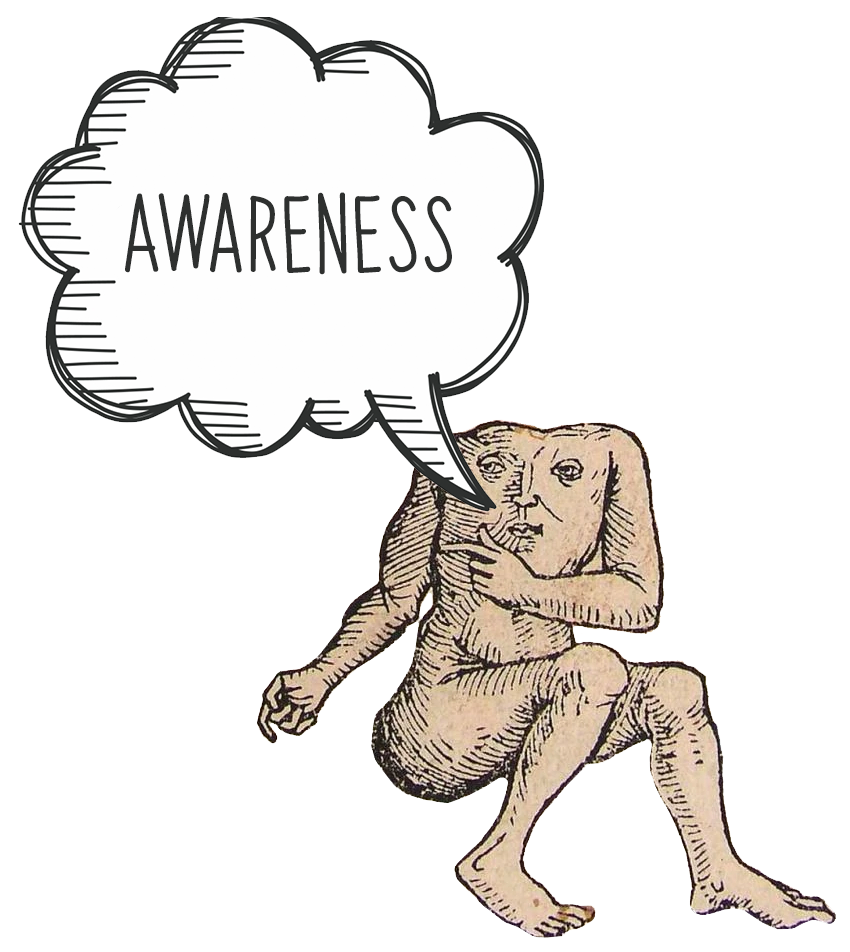
<style>
.page{position:relative;width:850px;height:952px;background:#ffffff}
.page>*{position:absolute;margin:0}
.t1{font:66.1px "PapayaSunrise";color:#2e302f}
</style>
<div class="page">
<p class="t1" style="left:125px;top:192px;width:327px;height:83px">Awareness</p>
</div>
